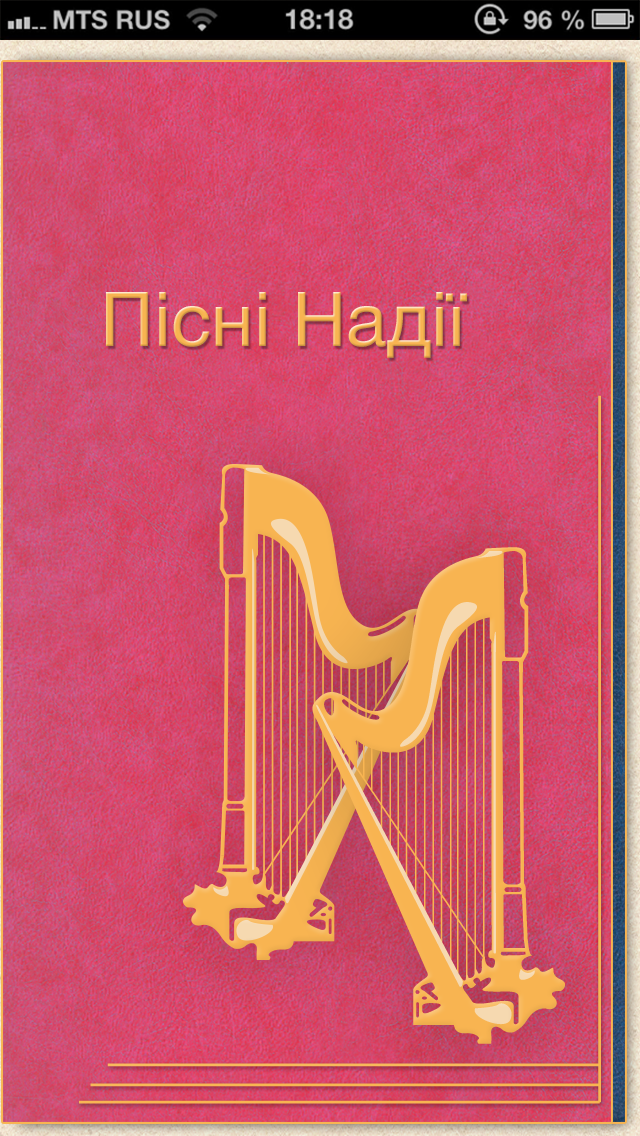
<style>
.page{position:relative;width:640px;height:1136px}
.page>*{position:absolute;margin:0}
.t1{font:75.6px "HelveticaNeue";color:#f8b451}
</style>
<div class="page">
<p class="t1" style="left:106px;top:292px;width:361px;height:66px">Пісні Надії</p>
</div>
